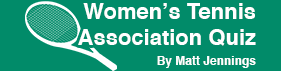
<style>
.page{position:relative;width:281px;height:71px;background:#018b69}
.page>*{position:absolute;margin:0}
.t1{font:22px "Helvetica-Bold";color:#ffffff}
.t2{font:12px "Helvetica-Bold";color:#ffffff}
</style>
<div class="page">
<p class="t1" style="left:78px;top:3px;width:178px;height:43px;text-align:right">Women’s Tennis<br>Association Quiz</p>
<p class="t2" style="left:157px;top:56px;width:99px;height:12px">By Matt Jennings</p>
</div>
